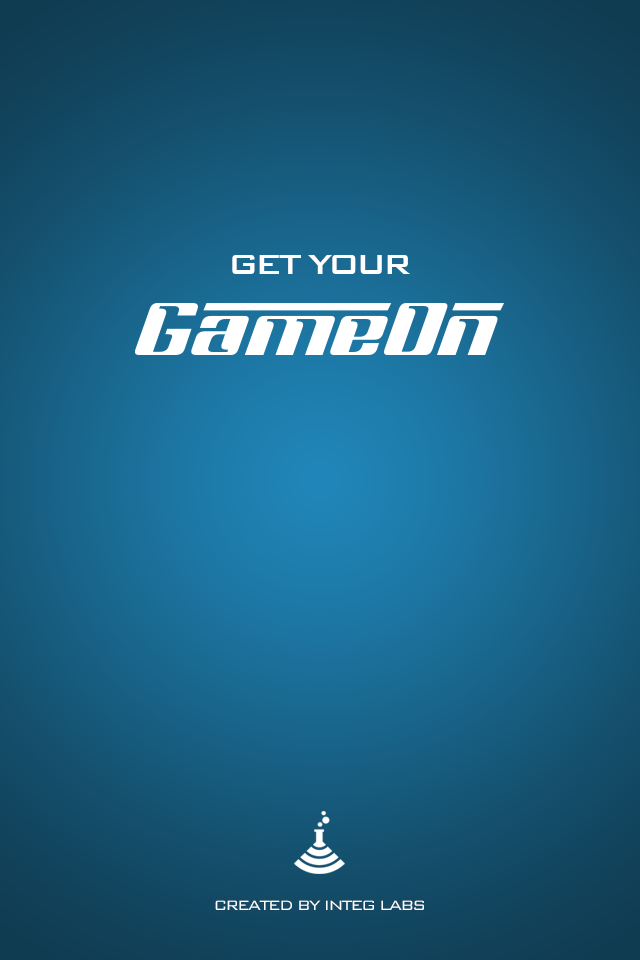
<style>
.page{position:relative;width:640px;height:960px}
.page>*{position:absolute;margin:0}
.t1{font:36px "BankGothic-Medium";letter-spacing:-0.1em;color:#ffffff;text-transform:uppercase}
.t2{font:18px "BankGothic-Light";letter-spacing:-0.1em;color:#ffffff;text-transform:uppercase}
</style>
<div class="page">
<p class="t1" style="left:232px;top:255px;width:178px;height:19px">get your</p>
<p class="t2" style="left:215px;top:900px;width:209px;height:10px">created by integ labs</p>
</div>
